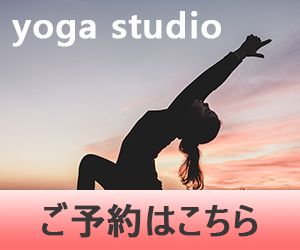
<style>
.page{position:relative;width:300px;height:250px}
.page>*{position:absolute;margin:0}
.t1{font:36px "YuGothicUI-Bold";letter-spacing:0.02em;color:#fefefe;font-weight:bold}
.t2{font:36px "YuGothicUI-Bold";letter-spacing:0.02em;color:#393737;font-weight:bold}
</style>
<div class="page">
<p class="t1" style="left:12px;top:11px;width:209px;height:36px">yoga studio</p>
<p class="t2" style="left:42px;top:202px;width:216px;height:36px">ご予約はこちら</p>
</div>
